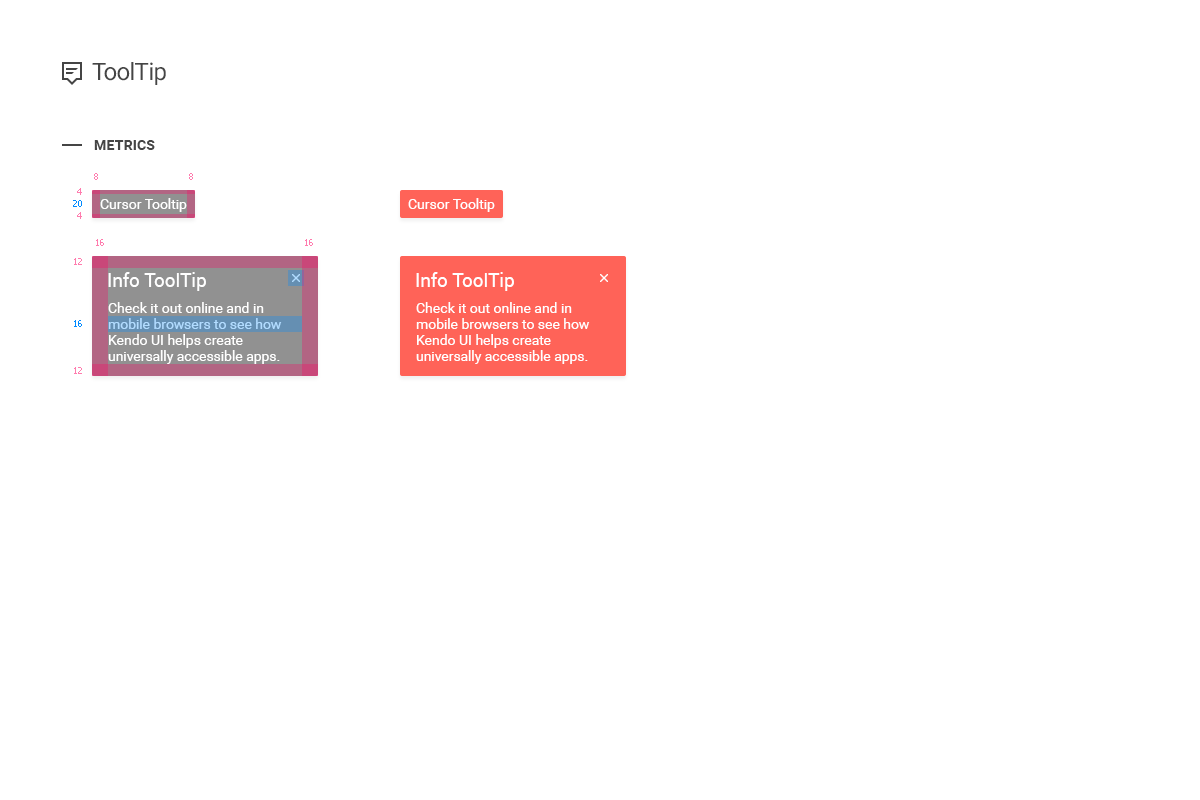
<style>
.page{position:relative;width:1200px;height:800px;background:#ffffff}
.page>*{position:absolute;margin:0}
.t1{font:24px "Roboto-Regular";letter-spacing:-0.025em;color:#454545}
.t2{font:14px "Roboto-Bold";letter-spacing:0.01em;color:#454545;text-transform:uppercase}
.t3{font:9px "Tahoma";color:#ff7cae}
.t4{font:14px "Roboto-Regular";color:#ffffff}
.t5{font:9px "Tahoma";color:#008aff}
.t6{font:19px "Roboto-Regular";color:#ffffff}
.t7{font:14px/16px "Roboto-Regular";color:#ffffff}
</style>
<div class="page">
<p class="t1" style="left:92px;top:62px;width:74px;height:23px">ToolTip</p>
<p class="t2" style="left:94px;top:140px;width:61px;height:10px">Metrics</p>
<p class="t3" style="left:94px;top:173px;width:4px;height:7px">8</p>
<p class="t3" style="left:189px;top:173px;width:4px;height:7px">8</p>
<p class="t3" style="left:77px;top:188px;width:5px;height:7px">4</p>
<p class="t4" style="left:100px;top:198px;width:87px;height:14px">Cursor Tooltip</p>
<p class="t4" style="left:408px;top:198px;width:87px;height:14px">Cursor Tooltip</p>
<p class="t5" style="left:73px;top:200px;width:9px;height:7px">20</p>
<p class="t3" style="left:77px;top:212px;width:5px;height:7px">4</p>
<p class="t3" style="left:96px;top:239px;width:8px;height:7px">16</p>
<p class="t3" style="left:305px;top:239px;width:8px;height:7px">16</p>
<p class="t3" style="left:74px;top:258px;width:8px;height:7px">12</p>
<p class="t6" style="left:108px;top:272px;width:98px;height:19px">Info ToolTip</p>
<p class="t6" style="left:416px;top:272px;width:98px;height:19px">Info ToolTip</p>
<p class="t7" style="left:108px;top:302px;width:174px;height:62px">Check it out online and in <br>mobile browsers to see how <br>Kendo UI helps create <br>universally accessible apps.</p>
<p class="t7" style="left:416px;top:302px;width:174px;height:62px">Check it out online and in <br>mobile browsers to see how <br>Kendo UI helps create <br>universally accessible apps.</p>
<p class="t5" style="left:74px;top:320px;width:8px;height:7px">16</p>
<p class="t3" style="left:74px;top:367px;width:8px;height:7px">12</p>
</div>
